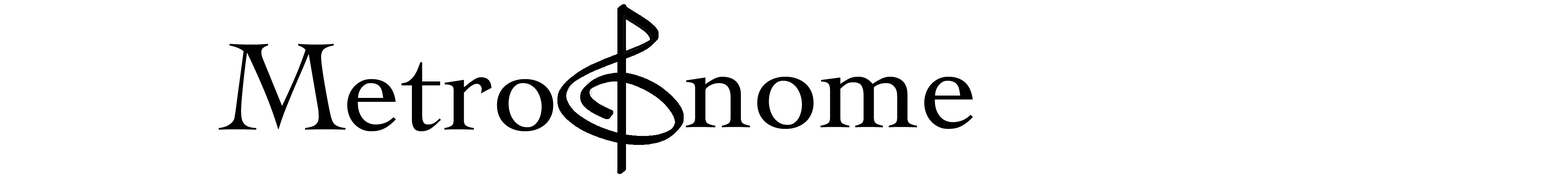
<style>
.page{position:relative;width:1568px;height:188px;background:#ffffff}
.page>*{position:absolute;margin:0}
.t1{font:130.4px "Cochin";color:#000000}
</style>
<div class="page">
<p class="t1" style="left:218px;top:44px;width:336px;height:87px">Metro</p>
<p class="t1" style="left:686px;top:77px;width:287px;height:52px">nome</p>
</div>
